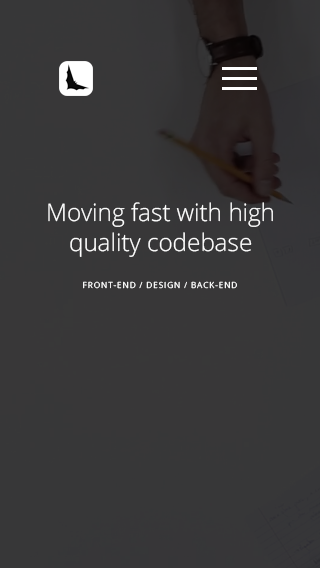
<style>
.page{position:relative;width:320px;height:568px;background:#373738}
.page>*{position:absolute;margin:0}
.t1{font:24.3px "OpenSans-Light";color:#ffffff}
.t2{font:8.3px "OpenSans";letter-spacing:0.1em;color:#ffffff}
.t3{font:8.3px "OpenSans-Light";letter-spacing:0.1em;color:#ffffff}
</style>
<div class="page">
<p class="t1" style="left:48px;top:202px;width:225px;height:55px;text-align:center">Moving fast with high <br>quality codebase</p>
<p class="t2" style="left:83px;top:281px;width:154px;height:8px">FRONT-END<span class="t3"> / </span>DESIGN<span class="t3"> / </span>BACK-END</p>
</div>
